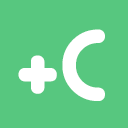
<style>
.page{position:relative;width:128px;height:128px;background:#57c77f}
.page>*{position:absolute;margin:0}
.t1{font:100px "Alba";color:#ffffff}
</style>
<div class="page">
<p class="t1" style="left:18px;top:29px;width:87px;height:72px">+C</p>
</div>
